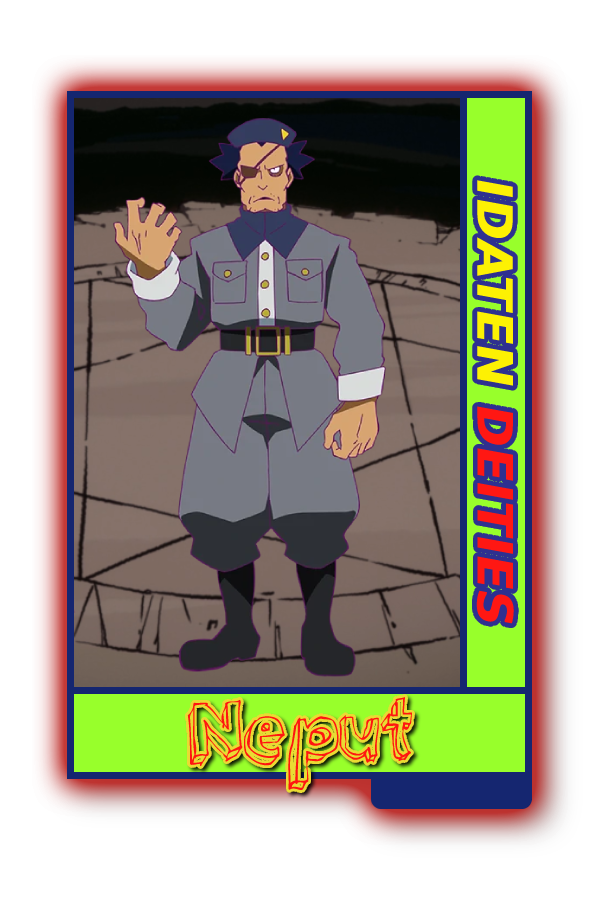
<style>
.page{position:relative;width:600px;height:900px;background:#ffffff}
.page>*{position:absolute;margin:0}
.t1{font:48.8px "MADETOMMY-Bold";color:#ff1713;font-weight:bold;font-style:italic}
.t2{font:48.8px "MADETOMMY-Bold";color:#fdf103;font-weight:bold;font-style:italic}
.t3{font:75px "3dumb";color:#ff1611}
</style>
<div class="page">
<p class="t1" style="left:476px;top:180px;width:38px;height:444px;rotate:90deg"><span class="t2">IDATEN </span>DEITIES</p>
<p class="t3" style="left:187px;top:697px;width:226px;height:94px">Neput</p>
</div>
